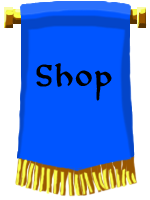
<style>
.page{position:relative;width:150px;height:200px;background:#0055ff}
.page>*{position:absolute;margin:0}
.t1{font:29.2px "DKNorthumbria";letter-spacing:0.05em;color:#000000}
</style>
<div class="page">
<p class="t1" style="left:36px;top:63px;width:76px;height:38px">Shop</p>
</div>
